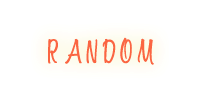
<style>
.page{position:relative;width:200px;height:100px;background:#ffffff}
.page>*{position:absolute;margin:0}
.t1{font:29px "VarianeScript";letter-spacing:0.235em;color:#fb6542;scale:0.8 1}
</style>
<div class="page">
<p class="t1" style="left:48px;top:37px;width:106px;height:28px">RANDOM</p>
</div>
